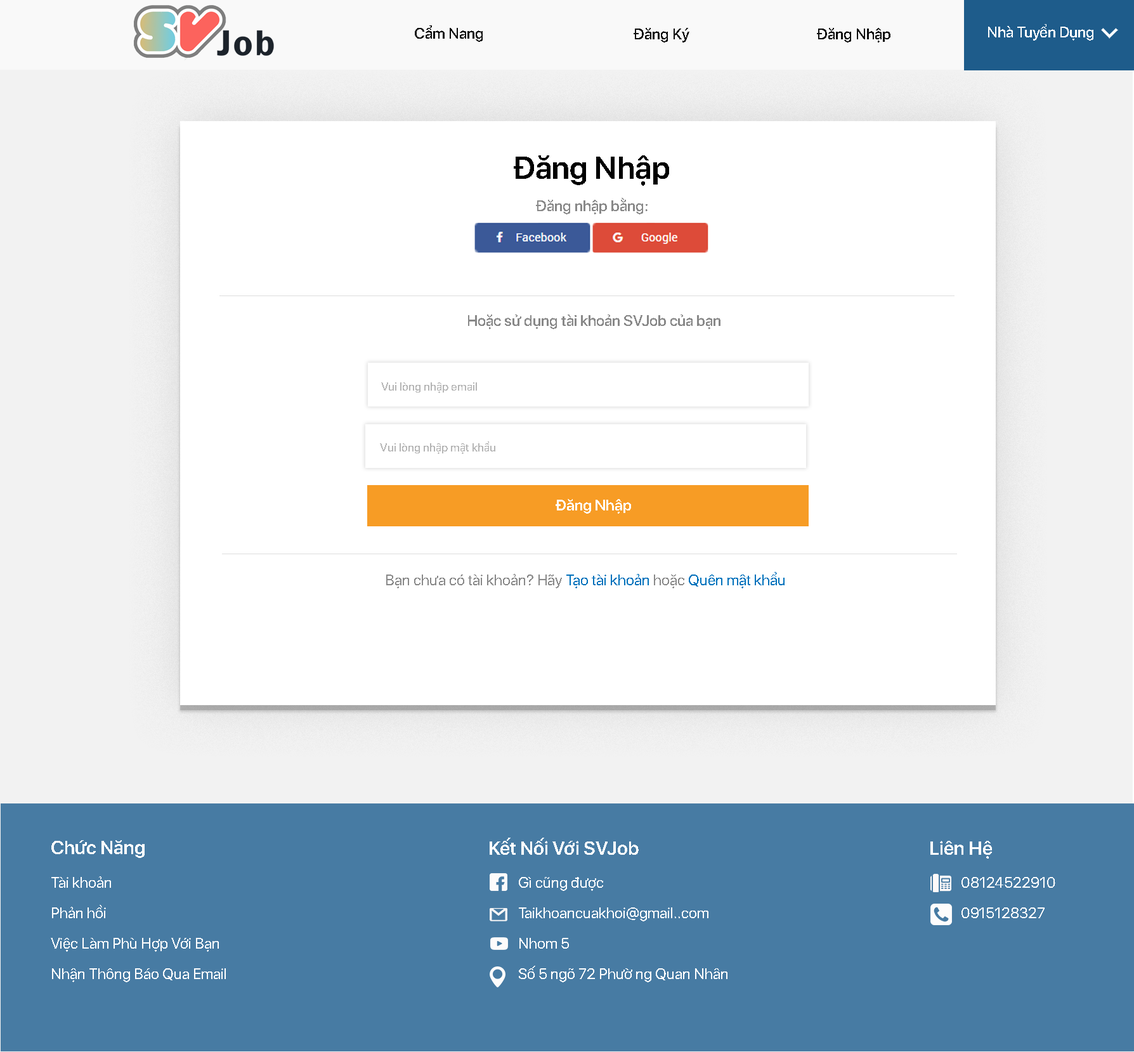
<style>
.page{position:relative;width:1134px;height:1052px;background:#ffffff}
.page>*{position:absolute;margin:0}
.t1{font:15.2px "SFProDisplay-Medium";color:#0d0d0d}
.t2{font:31.7px "SFProDisplay-Semibold";color:#000000}
.t3{font:15.2px "SFProDisplay-Medium";color:#898989}
.t4{font:15.2px "SFProDisplay-Regular";color:#898989}
.t5{font:15.2px "SFProDisplay-Regular";color:#0072bc}
.t6{font:19px "SFProDisplay-Semibold";color:#ffffff}
.t7{font:15.2px/30.4px "SFProDisplay-Regular";color:#ffffff}
</style>
<div class="page">
<p class="t1" style="left:415px;top:25px;width:67px;height:17px">Cẩm Nang</p>
<p class="t1" style="left:633px;top:28px;width:56px;height:14px">Đăng Ký</p>
<p class="t1" style="left:817px;top:28px;width:73px;height:14px">Đăng Nhập</p>
<p class="t1" style="left:817px;top:28px;width:73px;height:14px">Đăng Nhập</p>
<p class="t2" style="left:514px;top:155px;width:155px;height:31px">Đăng Nhập</p>
<p class="t3" style="left:536px;top:198px;width:111px;height:16px">Đăng nhập bằng:</p>
<p class="t3" style="left:468px;top:314px;width:252px;height:15px">Hoặc sử dụng tài khoản SVJob của bạn</p>
<p class="t4" style="left:386px;top:572px;width:398px;height:16px">Bạn chưa có tài khoản? Hãy <span class="t5">Tạo tài khoản</span> hoặc <span class="t5">Quên mật khẩu</span></p>
<p class="t6" style="left:51px;top:840px;width:94px;height:18px">Chức Năng</p>
<p class="t6" style="left:489px;top:838px;width:149px;height:17px">Kết Nối Với SVJob</p>
<p class="t6" style="left:930px;top:841px;width:62px;height:17px">Liên Hệ</p>
<p class="t7" style="left:51px;top:876px;width:175px;height:106px">Tài khoản<br>Phản hồi<br>Việc Làm Phù Hợp Với Bạn<br>Nhận Thông Báo Qua Email</p>
<p class="t7" style="left:519px;top:877px;width:208px;height:105px">Gì cũng được<br>Taikhoancuakhoi@gmail..com<br>Nhom 5<br>Số 5 ngõ 72 Phườ ng Quan Nhân</p>
<p class="t7" style="left:961px;top:877px;width:94px;height:41px">08124522910<br>0915128327</p>
</div>
